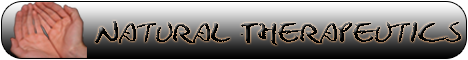
<style>
.page{position:relative;width:468px;height:60px}
.page>*{position:absolute;margin:0}
.t1{font:29.4px "NATURALWRITING";color:#000000;scale:1.27 1}
</style>
<div class="page">
<p class="t1" style="left:95px;top:21px;width:366px;height:24px">Natural Therapeutics</p>
</div>
